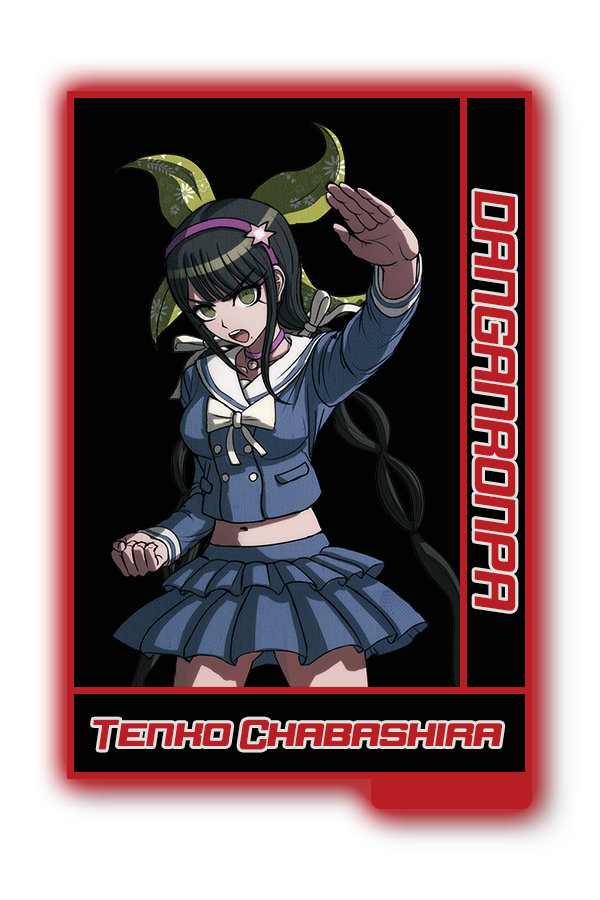
<style>
.page{position:relative;width:600px;height:900px;background:#020202}
.page>*{position:absolute;margin:0}
.t1{font:48.8px "DorBlue";color:#bb2c2e}
.t2{font:35.7px "DorBlue";color:#bb2c2e}
</style>
<div class="page">
<p class="t1" style="left:474px;top:191px;width:42px;height:420px;rotate:90deg">DANGANRONPA</p>
<p class="t2" style="left:93px;top:719px;width:410px;height:31px">Tenko Chabashira</p>
</div>
